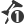
<style>
.page{position:relative;width:24px;height:24px;background:#ffffff}
.page>*{position:absolute;margin:0}
.t1{font:14.2px "BarlowCondensed-Bold";color:#ffffff}
</style>
<div class="page">
<p class="t1" style="left:15px;top:11px;width:4px;height:11px">1</p>
</div>
